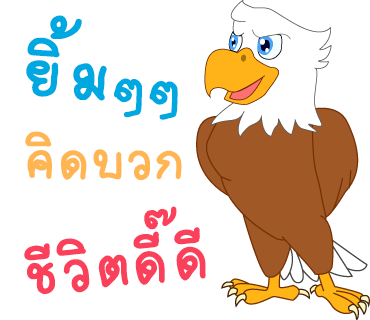
<style>
.page{position:relative;width:370px;height:320px;background:#ffffff}
.page>*{position:absolute;margin:0}
.t1{font:100px "2005_iannnnnMTV";letter-spacing:0.025em;color:#00a8e1;scale:1.06 1}
.t2{font:85px "2005_iannnnnMTV";letter-spacing:0.025em;color:#00a8e1;scale:1.06 1}
.t3{font:80px "2005_iannnnnMTV";letter-spacing:0.025em;color:#ffb652;scale:1.06 1}
.t4{font:90px "2005_iannnnnMTV";letter-spacing:0.025em;color:#fa405a;scale:1.06 1}
</style>
<div class="page">
<p class="t1" style="left:26px;top:15px;width:152px;height:105px;rotate:4deg">ยิ้ม<span class="t2">ๆๆ</span></p>
<p class="t3" style="left:25px;top:131px;width:157px;height:50px">คิดบวก</p>
<p class="t4" style="left:24px;top:206px;width:182px;height:88px;rotate:-6deg">ชีวิตดี๊ดี</p>
</div>
